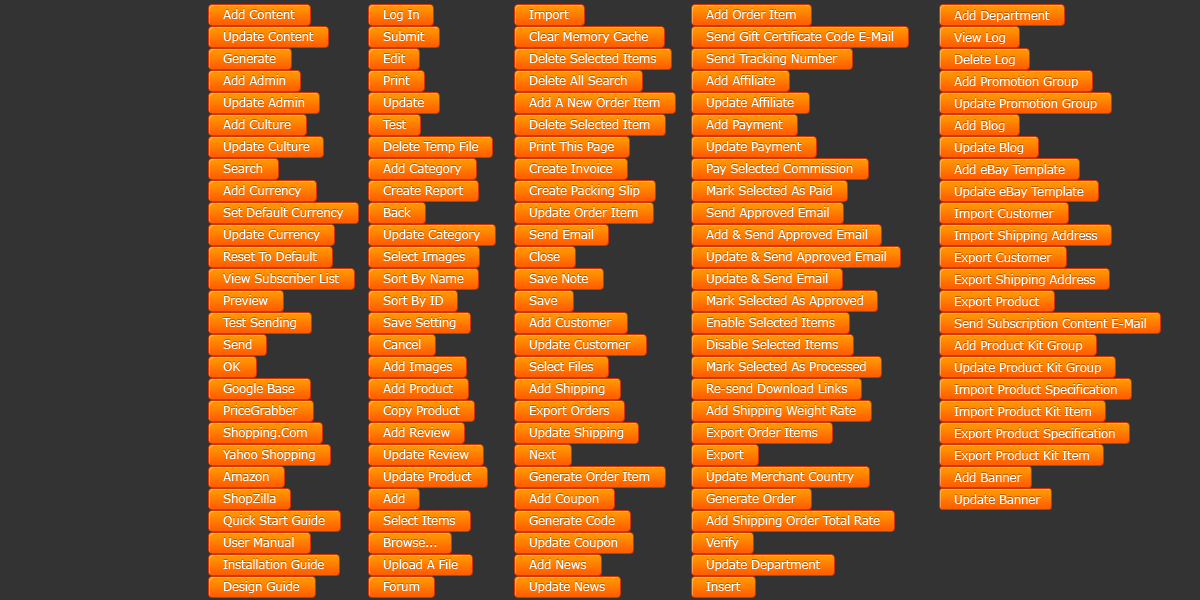
<style>
.page{position:relative;width:1200px;height:600px;background:#333333}
.page>*{position:absolute;margin:0}
.t1{font:12px/22px "Verdana";letter-spacing:-0.025em;color:#ffffff}
</style>
<div class="page">
<p class="t1" style="left:222px;top:9px;width:122px;height:584px">Add Content<br>Update Content<br>Generate<br>Add Admin<br>Update Admin<br>Add Culture<br>Update Culture<br>Search<br>Add Currency<br>Set Default Currency<br>Update Currency<br>Reset To Default<br>View Subscriber List<br>Preview<br>Test Sending<br>Send<br>OK<br>Google Base<br>PriceGrabber<br>Shopping.Com<br>Yahoo Shopping<br>Amazon<br>ShopZilla<br>Quick Start Guide<br>User Manual<br>Installation Guide<br>Design Guide</p>
<p class="t1" style="left:382px;top:10px;width:98px;height:581px">Log In<br>Submit<br>Edit<br>Print<br>Update<br>Test<br>Delete Temp File<br>Add Category<br>Create Report<br>Back<br>Update Category<br>Select Images<br>Sort By Name<br>Sort By ID<br>Save Setting<br>Cancel<br>Add Images<br>Add Product<br>Copy Product<br>Add Review<br>Update Review<br>Update Product<br>Add<br>Select Items<br>Browse...<br>Upload A File<br>Forum</p>
<p class="t1" style="left:529px;top:10px;width:131px;height:583px">Import<br>Clear Memory Cache<br>Delete Selected Items<br>Delete All Search<br>Add A New Order Item<br>Delete Selected Item<br>Print This Page<br>Create Invoice<br>Create Packing Slip<br>Update Order Item<br>Send Email<br>Close<br>Save Note<br>Save<br>Add Customer<br>Update Customer<br>Select Files<br>Add Shipping<br>Export Orders<br>Update Shipping<br>Next<br>Generate Order Item<br>Add Coupon<br>Generate Code<br>Update Coupon<br>Add News<br>Update News</p>
<p class="t1" style="left:706px;top:9px;width:188px;height:582px">Add Order Item<br>Send Gift Certificate Code E-Mail<br>Send Tracking Number<br>Add Affiliate<br>Update Affiliate<br>Add Payment<br>Update Payment<br>Pay Selected Commission<br>Mark Selected As Paid<br>Send Approved Email<br>Add &amp; Send Approved Email<br>Update &amp; Send Approved Email<br>Update &amp; Send Email<br>Mark Selected As Approved<br>Enable Selected Items<br>Disable Selected Items<br>Mark Selected As Processed<br>Re-send Download Links<br>Add Shipping Weight Rate<br>Export Order Items<br>Export<br>Update Merchant Country<br>Generate Order<br>Add Shipping Order Total Rate<br>Verify<br>Update Department<br>Insert</p>
<p class="t1" style="left:954px;top:10px;width:192px;height:496px">Add Department<br>View Log<br>Delete Log<br>Add Promotion Group<br>Update Promotion Group<br>Add Blog<br>Update Blog<br>Add eBay Template<br>Update eBay Template<br>Import Customer<br>Import Shipping Address<br>Export Customer<br>Export Shipping Address<br>Export Product<br>Send Subscription Content E-Mail<br>Add Product Kit Group<br>Update Product Kit Group<br>Import Product Specification<br>Import Product Kit Item<br>Export Product Specification<br>Export Product Kit Item<br>Add Banner<br>Update Banner</p>
</div>
